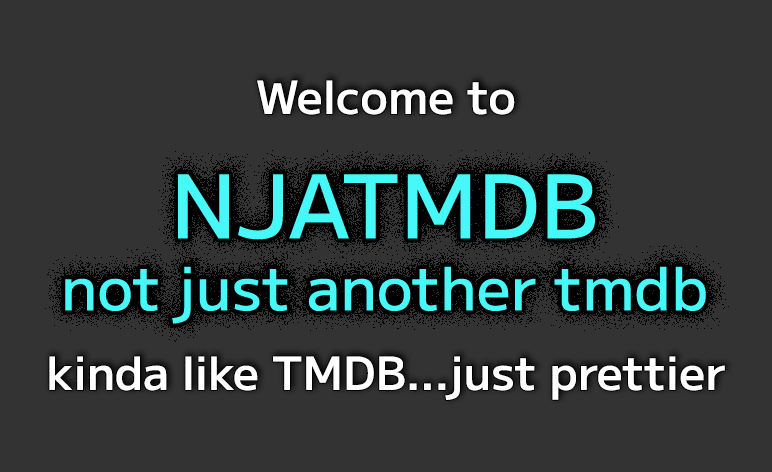
<style>
.page{position:relative;width:772px;height:472px;background:#333333}
.page>*{position:absolute;margin:0}
.t1{font:46px "MPLUS1-SemiBold";color:#ffffff}
</style>
<div class="page">
<p class="t1" style="left:49px;top:80px;width:676px;height:320px;text-align:center">Welcome to<br><br><br><br><br>kinda like TMDB...just prettier</p>
</div>
